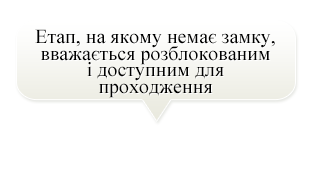
<style>
.page{position:relative;width:312px;height:170px;background:#ffffff}
.page>*{position:absolute;margin:0}
.t1{font:20px/16.7px "TimesNewRomanPSMT";color:#000000}
</style>
<div class="page">
<p class="t1" style="left:35px;top:29px;width:240px;height:69px;text-align:center">Етап, на якому немає замку,<br>вважається розблокованим<br>і доступним для проходження</p>
</div>
